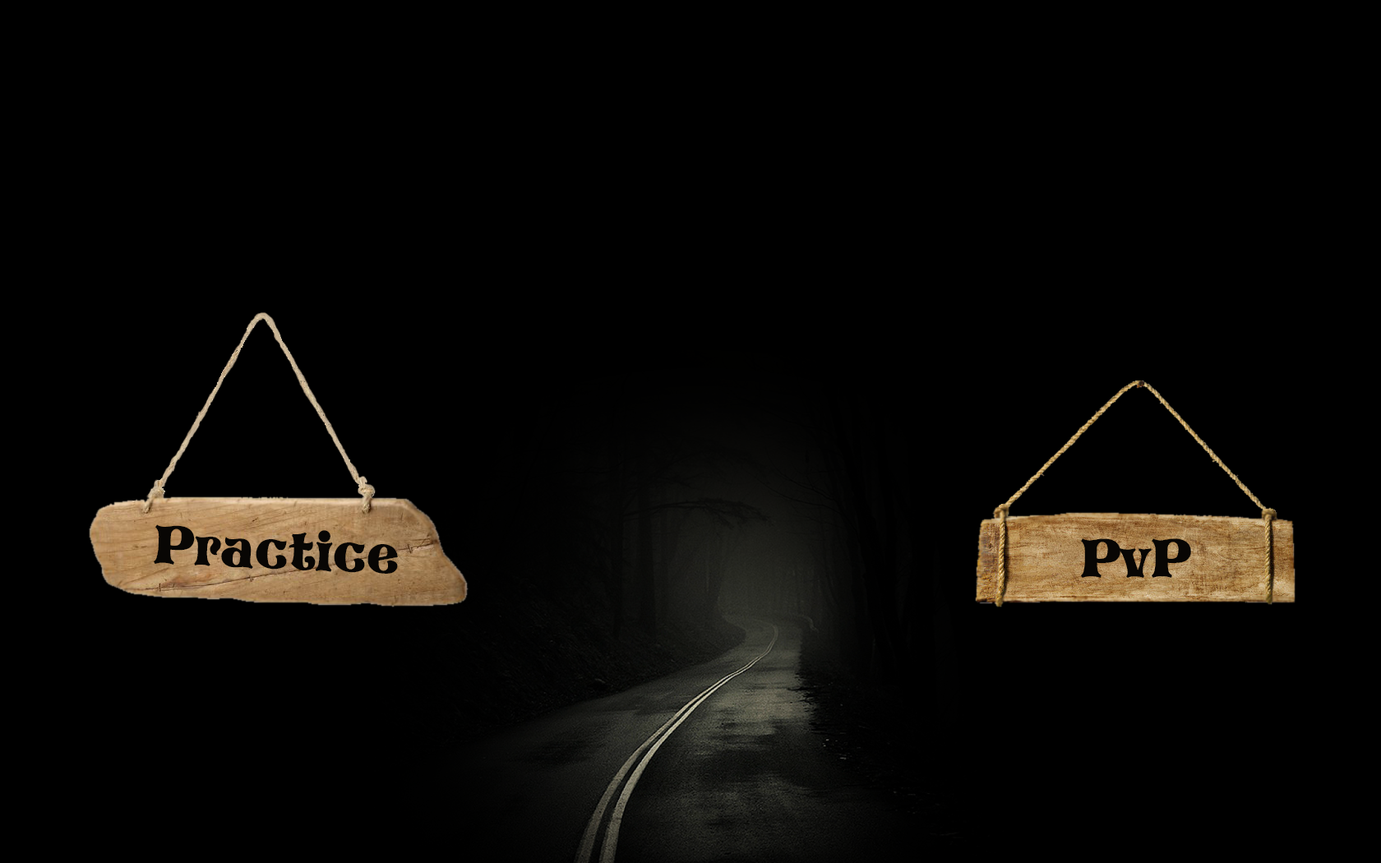
<style>
.page{position:relative;width:1381px;height:863px;background:#000000}
.page>*{position:absolute;margin:0}
.t1{font:53.4px "Storybook";color:#080604}
</style>
<div class="page">
<p class="t1" style="left:154px;top:525px;width:244px;height:49px;rotate:2deg">Practice</p>
<p class="t1" style="left:1081px;top:539px;width:110px;height:39px">PvP</p>
</div>
